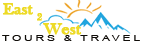
<style>
.page{position:relative;width:141px;height:42px;background:#ffffff}
.page>*{position:absolute;margin:0}
.t1{font:16.7px "BaskOldFace";color:#edda26;font-weight:bold}
</style>
<div class="page">
<p class="t1" style="left:3px;top:3px;width:79px;height:32px">East 2<br>  West</p>
</div>
